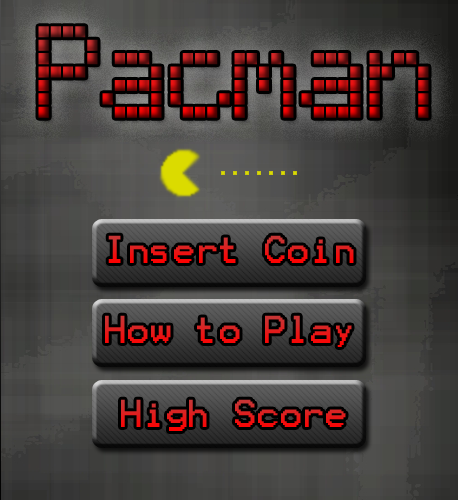
<style>
.page{position:relative;width:458px;height:500px}
.page>*{position:absolute;margin:0}
.t1{font:121.9px "TexasLED";letter-spacing:-0.02em}
.t2{font:31.3px "Terminal";letter-spacing:-0.02em;color:#ec1212}
.t3{font:31.3px "Terminal";letter-spacing:-0.02em;color:#e41919}
</style>
<div class="page">
<p class="t1" style="left:38px;top:26px;width:391px;height:92px">Pacman</p>
<p class="t2" style="left:108px;top:235px;width:246px;height:28px">Insert Coin</p>
<p class="t3" style="left:105px;top:315px;width:247px;height:32px">How to Play</p>
<p class="t3" style="left:121px;top:399px;width:225px;height:32px">High Score</p>
</div>
